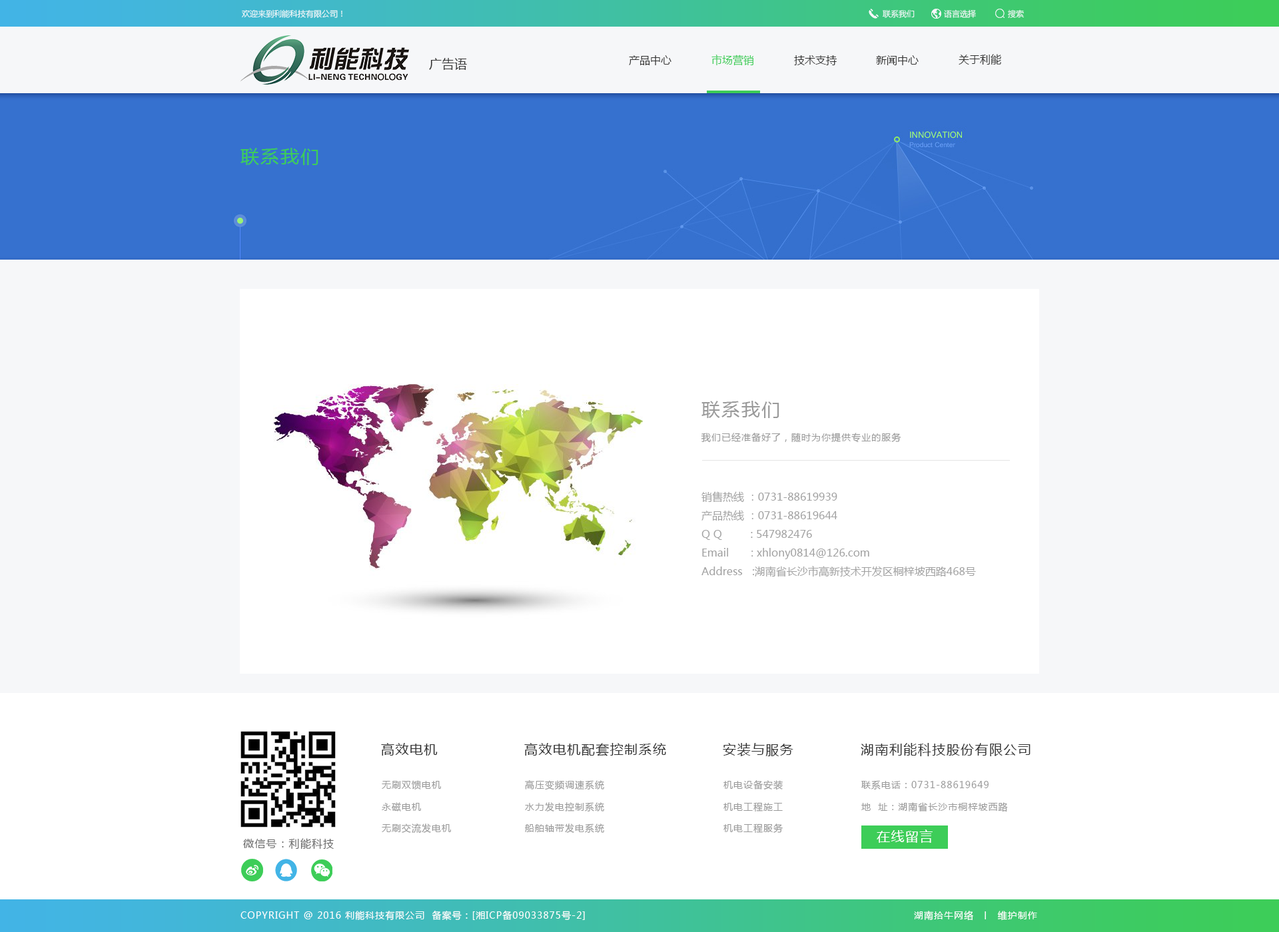
<style>
.page{position:relative;width:1279px;height:932px;background:#ffffff}
.page>*{position:absolute;margin:0}
.t1{font:8px "MicrosoftYaHei";color:#f6f7f9}
.t2{font:10.7px "MicrosoftYaHei";color:#343434}
.t3{font:12.6px "MicrosoftYaHei";color:#343434}
.t4{font:10.7px "MicrosoftYaHei";color:#3dcd58}
.t5{font:18.6px "MicrosoftYaHei";letter-spacing:0.072em;color:#3dcd58}
.t6{font:18.6px "MicrosoftYaHei";letter-spacing:0.072em;color:#9a9a9a}
.t7{font:9.3px "MicrosoftYaHei";letter-spacing:0.072em;color:#9a9a9a}
.t8{font:10.7px/18.6px "MicrosoftYaHei";color:#a2a2a2}
.t9{font:13.3px "MicrosoftYaHei";letter-spacing:0.072em;color:#323232}
.t10{font:13.3px "MicrosoftYaHei";letter-spacing:0.072em;color:#ffffff}
.t11{font:10.7px "MicrosoftYaHei";letter-spacing:0.072em;color:#676767}
.t12{font:9.3px "MicrosoftYaHei";letter-spacing:0.072em;color:#ffffff}
</style>
<div class="page">
<p class="t1" style="left:242px;top:9px;width:100px;height:9px">欢迎来到利能科技有限公司！</p>
<p class="t1" style="left:882px;top:10px;width:32px;height:8px">联系我们</p>
<p class="t1" style="left:944px;top:9px;width:32px;height:9px">语言选择</p>
<p class="t1" style="left:1008px;top:9px;width:16px;height:9px">搜索</p>
<p class="t2" style="left:958px;top:54px;width:43px;height:11px">关于利能</p>
<p class="t3" style="left:429px;top:58px;width:38px;height:12px">广告语</p>
<p class="t2" style="left:629px;top:55px;width:42px;height:10px">产品中心</p>
<p class="t4" style="left:711px;top:55px;width:43px;height:11px">市场营销</p>
<p class="t2" style="left:794px;top:55px;width:43px;height:10px">技术支持</p>
<p class="t2" style="left:876px;top:55px;width:42px;height:10px">新闻中心</p>
<p class="t5" style="left:240px;top:148px;width:78px;height:17px">联系我们</p>
<p class="t6" style="left:701px;top:401px;width:78px;height:17px">联系我们</p>
<p class="t7" style="left:701px;top:433px;width:200px;height:10px">我们已经准备好了，随时为你提供专业的服务</p>
<p class="t8" style="left:701px;top:492px;width:275px;height:85px">销售热线 ：0731-88619939<br>产品热线 ：0731-88619644<br>Q Q         : 547982476<br>Email       : xhlony0814@126.com<br>Address   :湖南省长沙市高新技术开发区桐梓坡西路468号</p>
<p class="t9" style="left:381px;top:743px;width:57px;height:13px">高效电机</p>
<p class="t9" style="left:524px;top:743px;width:142px;height:14px">高效电机配套控制系统</p>
<p class="t9" style="left:723px;top:743px;width:70px;height:14px">安装与服务</p>
<p class="t9" style="left:861px;top:743px;width:169px;height:14px">湖南利能科技股份有限公司</p>
<p class="t7" style="left:382px;top:781px;width:59px;height:9px">无刷双馈电机</p>
<p class="t7" style="left:525px;top:781px;width:79px;height:10px">高压变频调速系统</p>
<p class="t7" style="left:723px;top:781px;width:60px;height:9px">机电设备安装</p>
<p class="t7" style="left:861px;top:781px;width:127px;height:9px">联系电话：0731-88619649</p>
<p class="t7" style="left:382px;top:803px;width:39px;height:9px">永磁电机</p>
<p class="t7" style="left:525px;top:803px;width:79px;height:9px">水力发电控制系统</p>
<p class="t7" style="left:723px;top:803px;width:60px;height:10px">机电工程施工</p>
<p class="t7" style="left:861px;top:803px;width:147px;height:10px">地  址：湖南省长沙市桐梓坡西路</p>
<p class="t7" style="left:382px;top:824px;width:69px;height:10px">无刷交流发电机</p>
<p class="t7" style="left:525px;top:824px;width:79px;height:9px">船舶轴带发电系统</p>
<p class="t7" style="left:723px;top:824px;width:60px;height:10px">机电工程服务</p>
<p class="t10" style="left:877px;top:830px;width:55px;height:13px">在线留言</p>
<p class="t11" style="left:243px;top:839px;width:91px;height:11px">微信号：利能科技</p>
<p class="t12" style="left:240px;top:911px;width:345px;height:10px">COPYRIGHT @ 2016 利能科技有限公司  备案号：[湘ICP备09033875号-2]</p>
<p class="t12" style="left:914px;top:911px;width:123px;height:10px">湖南拾牛网络  丨  维护制作</p>
</div>
